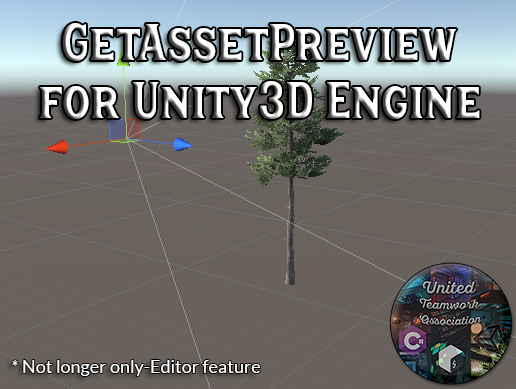
<style>
.page{position:relative;width:516px;height:389px}
.page>*{position:absolute;margin:0}
.t1{font:48px "HanleyPro-Block"}
.t2{font:18px "Lato-Regular";color:#ffffff}
</style>
<div class="page">
<p class="t1" style="left:39px;top:23px;width:441px;height:96px;text-align:center">GetAssetPreview<br>for Unity3D Engine</p>
<p class="t2" style="left:12px;top:360px;width:249px;height:16px">* Not longer only-Editor feature</p>
</div>
